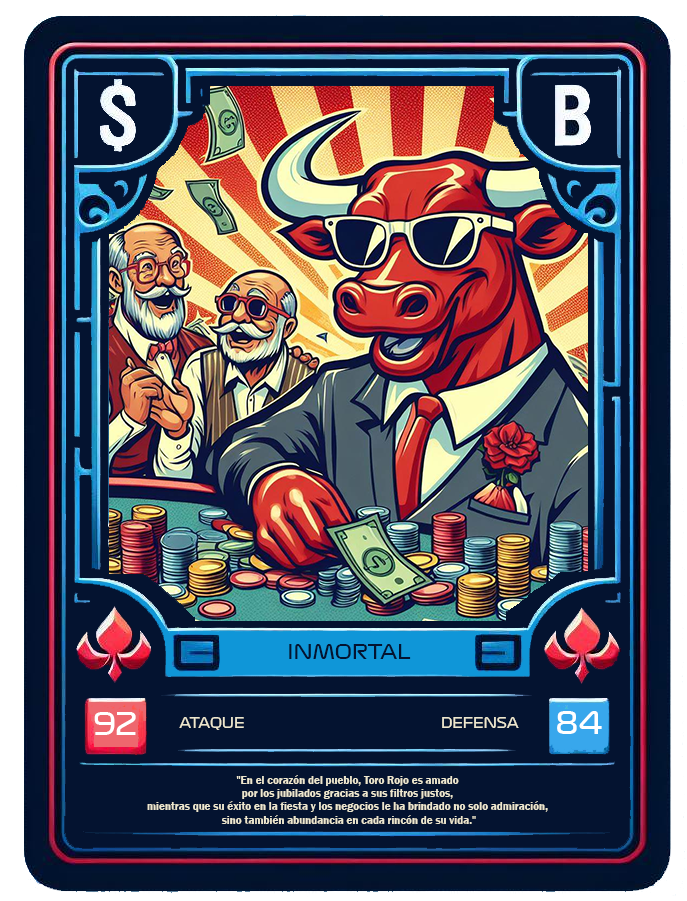
<style>
.page{position:relative;width:687px;height:901px;background:#041330}
.page>*{position:absolute;margin:0}
.t1{font:19.7px "Formula1-Display-Regular";color:#041330}
.t2{font:30.3px "Formula1-Display-Regular";color:#ffffff}
.t3{font:13.8px "Formula1-Display-Regular";color:#ede7cf}
.t4{font:11px "FranklinGothic-Demi";color:#ede7cf}
</style>
<div class="page">
<p class="t1" style="left:289px;top:644px;width:122px;height:15px">INMORTAL</p>
<p class="t2" style="left:94px;top:712px;width:42px;height:23px">92</p>
<p class="t2" style="left:557px;top:711px;width:45px;height:23px">84</p>
<p class="t3" style="left:179px;top:717px;width:340px;height:13px">ATAQUE      DEFENSA</p>
<p class="t4" style="left:147px;top:775px;width:401px;height:49px;text-align:center">"En el corazón del pueblo, Toro Rojo es amado <br>por los jubilados gracias a sus filtros justos, <br>mientras que su éxito en la fiesta y los negocios le ha brindado no solo admiración, <br>sino también abundancia en cada rincón de su vida."</p>
</div>
